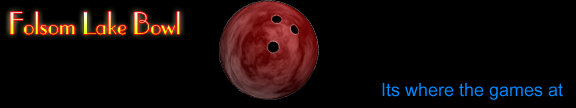
<style>
.page{position:relative;width:576px;height:108px;background:#000000}
.page>*{position:absolute;margin:0}
.t1{font:30px "Parisian"}
.t2{font:18px "ArialMT";color:#008aff}
</style>
<div class="page">
<p class="t1" style="left:10px;top:11px;width:170px;height:24px">Folsom Lake Bowl</p>
<p class="t2" style="left:382px;top:83px;width:181px;height:17px">Its where the games at</p>
</div>
